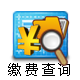
<style>
.page{position:relative;width:80px;height:80px;background:#ffffff}
.page>*{position:absolute;margin:0}
.t1{font:14px "NSimSun";letter-spacing:0.2em;color:#000000}
</style>
<div class="page">
<p class="t1" style="left:8px;top:63px;width:62px;height:13px">缴费查询</p>
</div>
